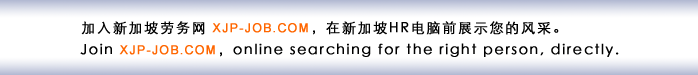
<style>
.page{position:relative;width:698px;height:75px;background:#ffffff}
.page>*{position:absolute;margin:0}
.t1{font:14px "STXihei";letter-spacing:0.1em;color:#000000;font-weight:bold}
.t2{font:12px "ArialMT";letter-spacing:0.1em;color:#ff6600;font-weight:bold}
</style>
<div class="page">
<p class="t1" style="left:81px;top:21px;width:478px;height:14px">加入新加坡劳务网 <span class="t2">XJP-JOB.COM</span>，在新加坡HR电脑前展示您的风采。</p>
<p class="t1" style="left:80px;top:43px;width:539px;height:14px">Join <span class="t2">XJP-JOB.COM</span>，online searching for the right person, directly.</p>
</div>
